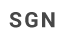
<style>
.page{position:relative;width:64px;height:40px;background:#ffffff}
.page>*{position:absolute;margin:0}
.t1{font:21.3px "Roboto-Bold";letter-spacing:0.1em;color:#474747}
</style>
<div class="page">
<p class="t1" style="left:9px;top:12px;width:46px;height:16px">SGN</p>
</div>
